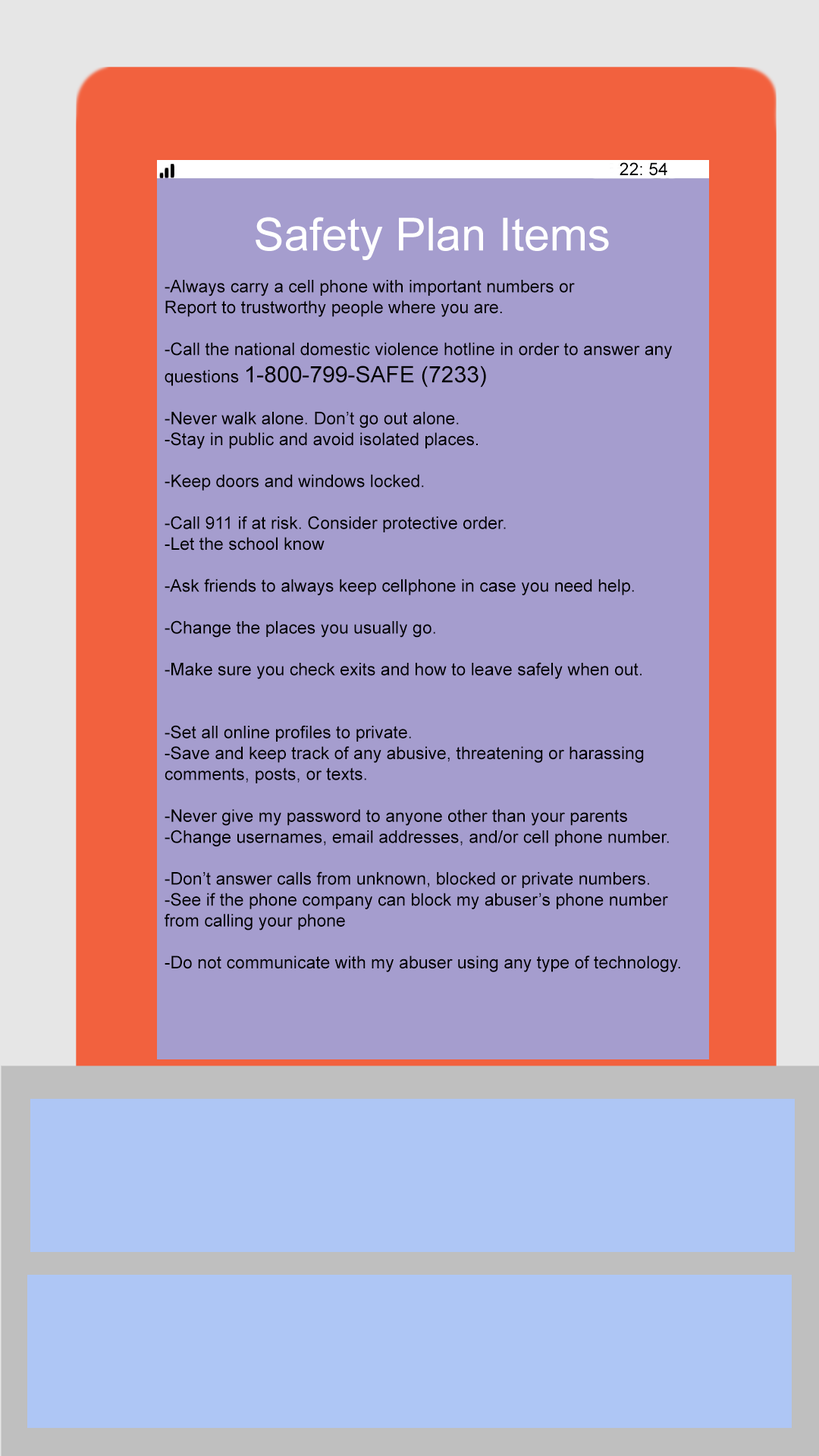
<style>
.page{position:relative;width:819px;height:1456px;background:#a59dce}
.page>*{position:absolute;margin:0}
.t1{font:17.4px "ArialMT";color:#000000}
.t2{font:45.5px "ArialMT";color:#ffffff}
.t3{font:22.7px "ArialMT";color:#000000}
</style>
<div class="page">
<p class="t1" style="left:620px;top:162px;width:47px;height:14px">22: 54</p>
<p class="t1" style="left:165px;top:217px;width:515px;height:755px;text-align:center"><span class="t2">Safety Plan Items<br></span><br>-Always carry a cell phone with important numbers or<br>Report to trustworthy people where you are.<br><br>-Call the national domestic violence hotline in order to answer any questions <span class="t3">1-800-799-SAFE (7233)<br></span><br>-Never walk alone. Don’t go out alone.<br>-Stay in public and avoid isolated places.<br><br>-Keep doors and windows locked.<br><br>-Call 911 if at risk. Consider protective order.<br>-Let the school know<br><br>-Ask friends to always keep cellphone in case you need help.<br><br>-Change the places you usually go.<br><br>-Make sure you check exits and how to leave safely when out.<br><br><br>-Set all online profiles to private.<br>-Save and keep track of any abusive, threatening or harassing     comments, posts, or texts.<br><br>-Never give my password to anyone other than your parents <br>-Change usernames, email addresses, and/or cell phone number.<br><br>-Don’t answer calls from unknown, blocked or private numbers.<br>-See if the phone company can block my abuser’s phone number from calling your phone<br><br>-Do not communicate with my abuser using any type of technology.</p>
</div>
